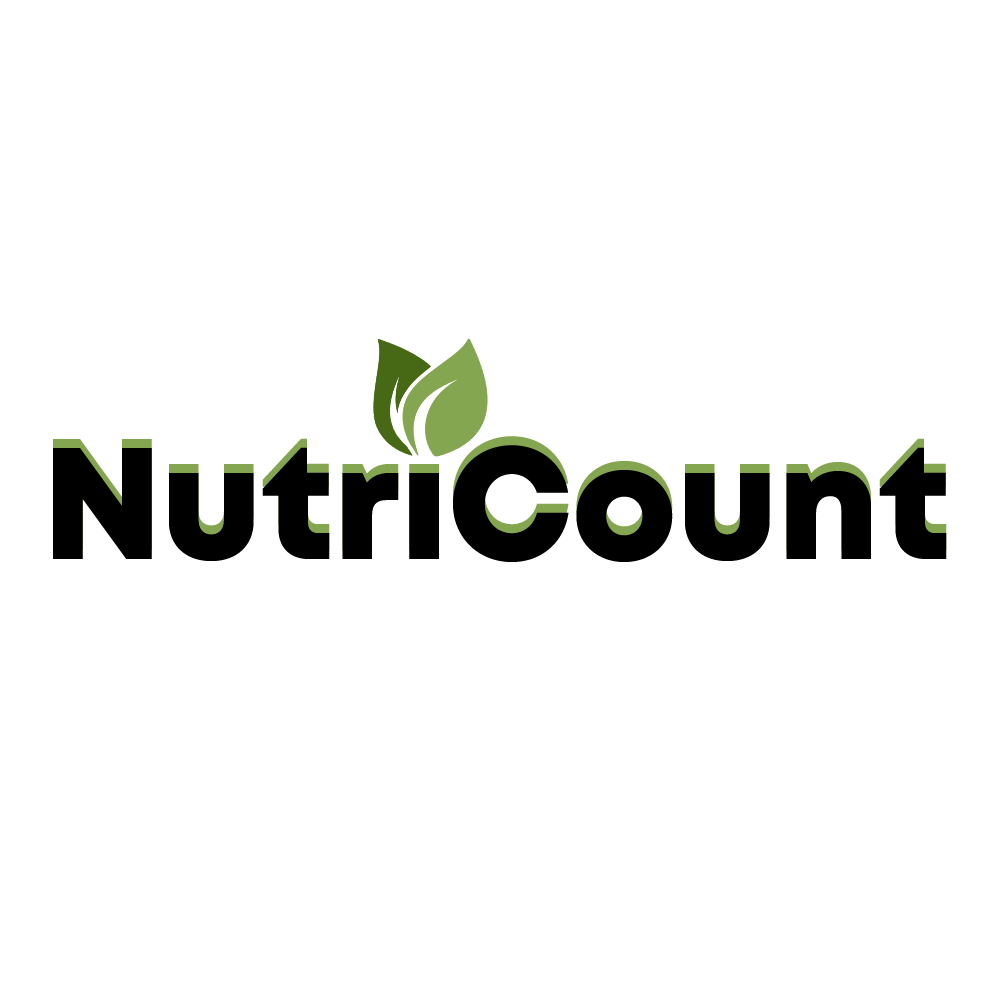
<style>
.page{position:relative;width:1000px;height:1000px;background:#ffffff}
.page>*{position:absolute;margin:0}
.t1{font:158.5px "Mont-HeavyDEMO";color:#000000}
</style>
<div class="page">
<p class="t1" style="left:53px;top:437px;width:894px;height:125px">NutriCount</p>
</div>
